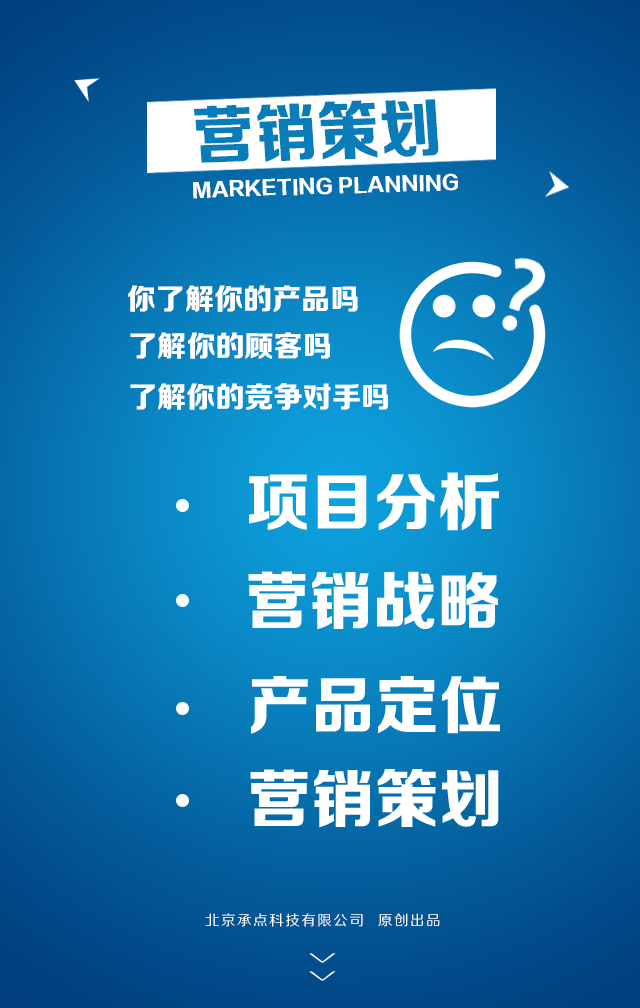
<style>
.page{position:relative;width:640px;height:1008px}
.page>*{position:absolute;margin:0}
.t1{font:63.7px "FZZDHJW--GB1-0";letter-spacing:0.005em;color:#087dba;text-transform:uppercase}
.t2{font:19.2px "FZZDHJW--GB1-0";letter-spacing:0.005em;color:#ffffff;text-transform:uppercase}
.t3{font:29.3px "FZZDHJW--GB1-0";letter-spacing:0.005em;color:#ffffff;text-transform:uppercase}
.t4{font:14.2px "FZZHJW--GB1-0";letter-spacing:0.1em;color:#ffffff;text-transform:uppercase}
.t5{font:36.8px "FZZXHJW--GB1-0";letter-spacing:0.5em;color:#ffffff;text-transform:uppercase;scale:0.44 1}
</style>
<div class="page">
<p class="t1" style="left:194px;top:99px;width:245px;height:64px;rotate:-2deg">营销策划</p>
<p class="t2" style="left:193px;top:173px;width:265px;height:26px;rotate:-2deg">Marketing Planning</p>
<p class="t3" style="left:128px;top:285px;width:230px;height:27px">你了解你的产品吗</p>
<p class="t3" style="left:130px;top:332px;width:200px;height:27px">了解你的顾客吗</p>
<p class="t3" style="left:130px;top:383px;width:258px;height:27px">了解你的竞争对手吗</p>
<p class="t4" style="left:205px;top:913px;width:235px;height:14px">北京承点科技有限公司  原创出品</p>
<p class="t5" style="left:309px;top:953px;width:27px;height:28px;rotate:90deg">&gt;&gt;</p>
</div>
